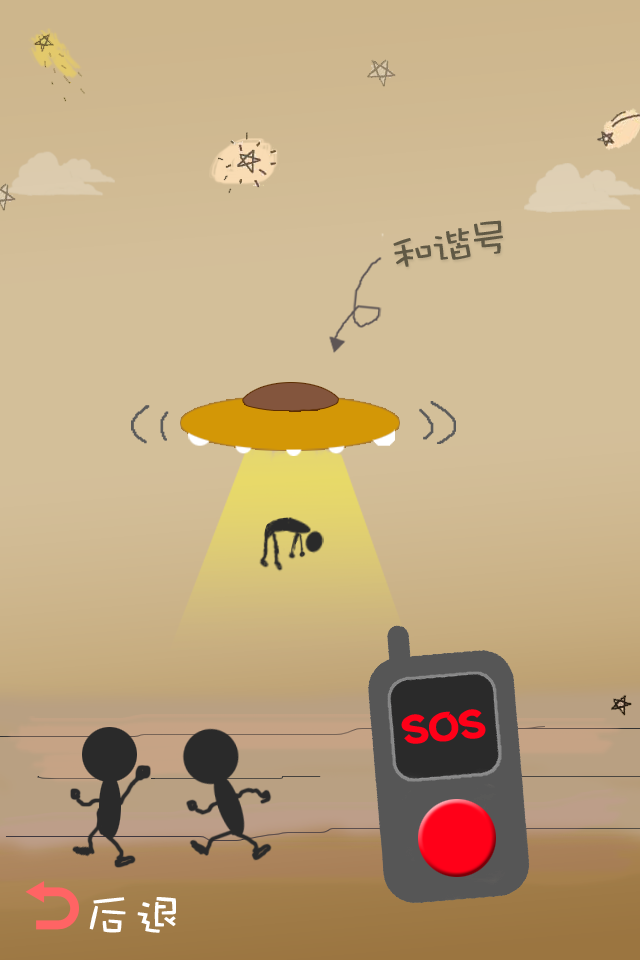
<style>
.page{position:relative;width:640px;height:960px}
.page>*{position:absolute;margin:0}
.t1{font:42.8px "DFPWaWaW5";color:#605945;scale:1.11 1}
.t2{font:41.2px "Jtaiji";color:#ff0018;scale:1.11 1}
.t3{font:50px "DFPWaWaW5";color:#ffffff}
</style>
<div class="page">
<p class="t1" style="left:393px;top:220px;width:110px;height:47px;rotate:-11deg">和谐号</p>
<p class="t2" style="left:401px;top:709px;width:85px;height:35px;rotate:-5deg">SOS</p>
<p class="t3" style="left:89px;top:897px;width:87px;height:36px">后退</p>
</div>
